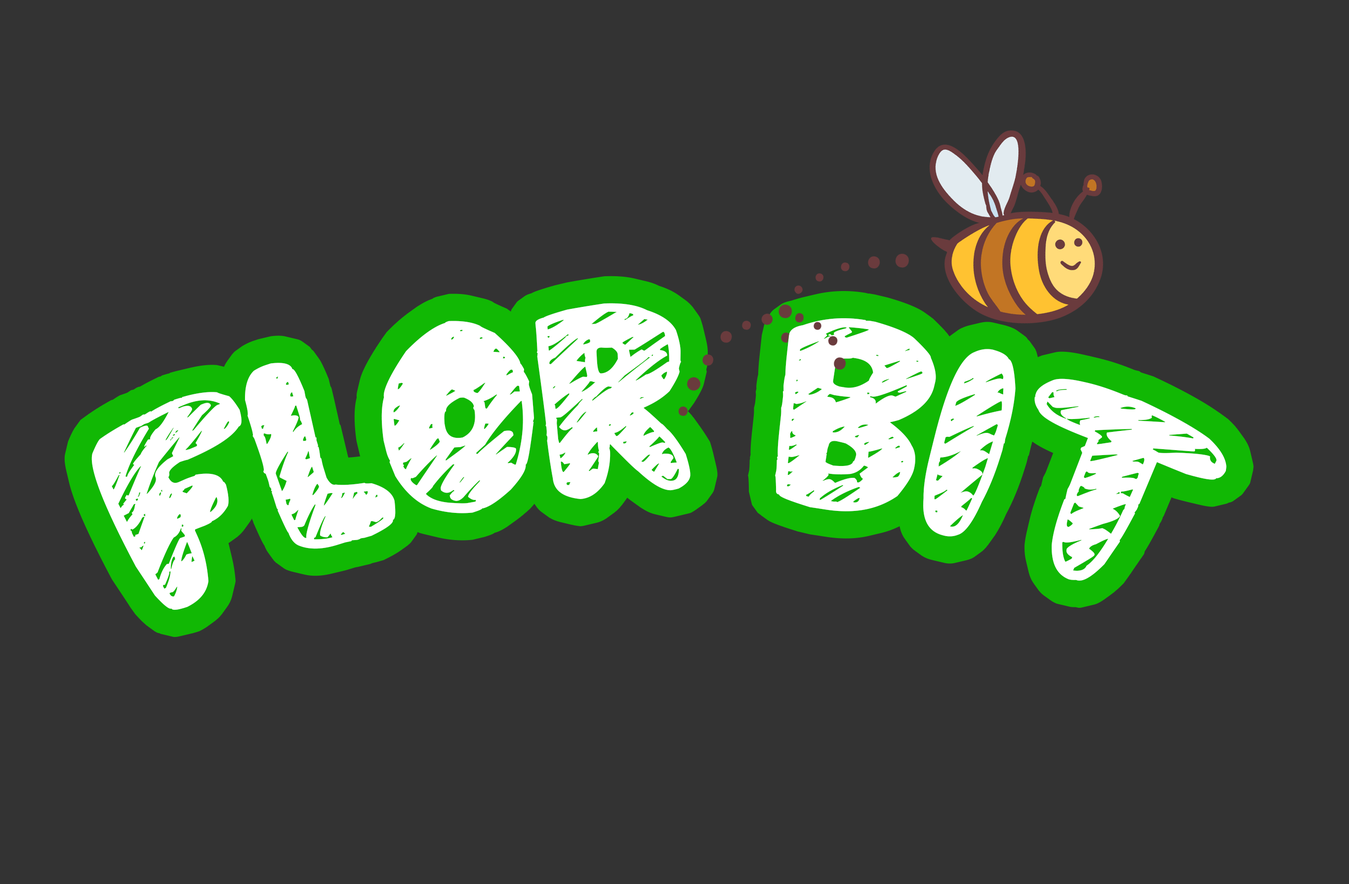
<style>
.page{position:relative;width:1349px;height:884px;background:#333333}
.page>*{position:absolute;margin:0}
.t1{font:275px "CallMe,Maybe?";color:#ffffff}
</style>
<div class="page">
<p class="t1" style="left:91px;top:303px;width:1136px;height:307px">FLOR BIt</p>
</div>
